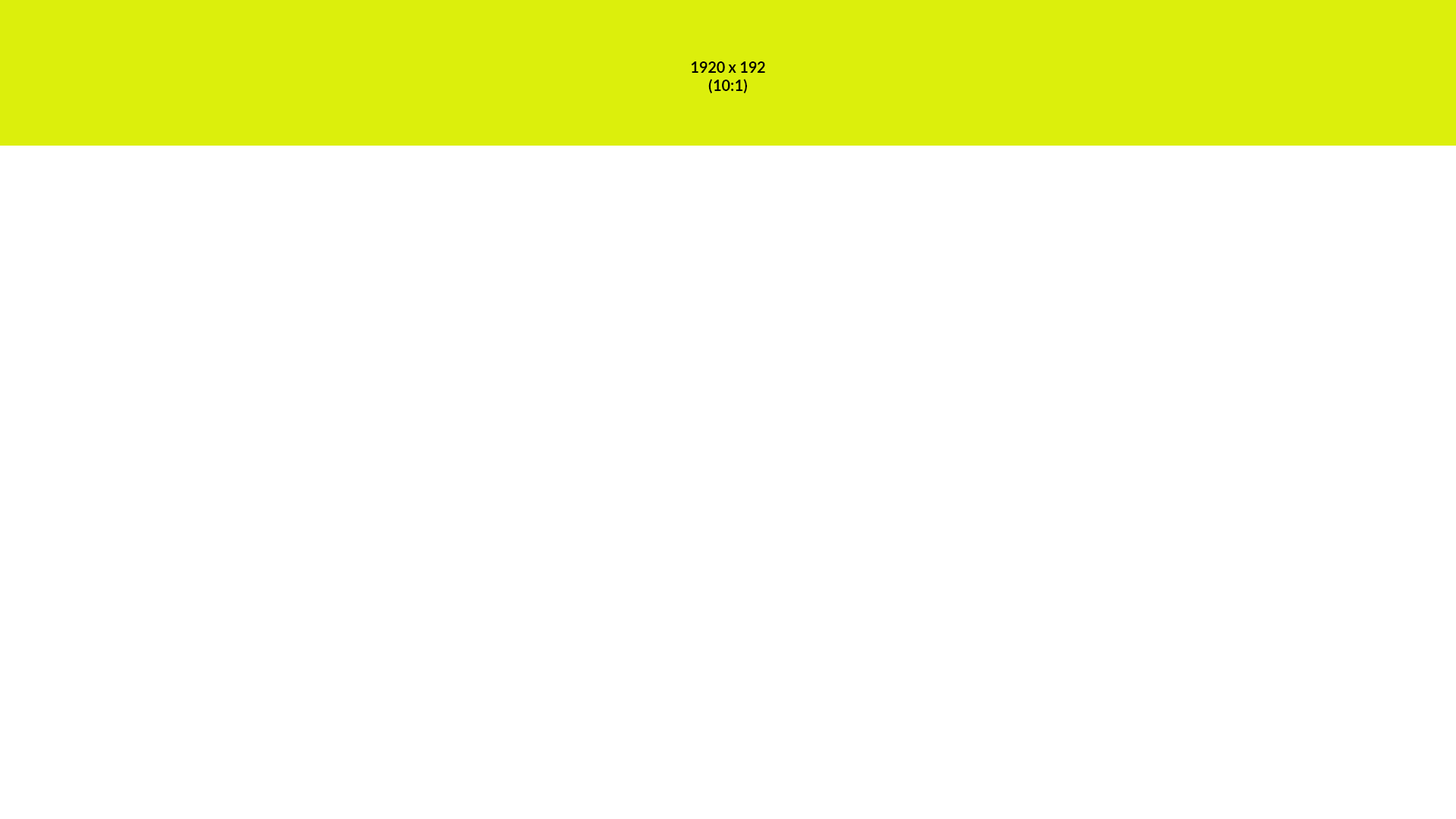
<style>
.page{position:relative;width:1456px;height:819px;background:#ffffff}
.page>*{position:absolute;margin:0}
.t1{font:15.2px "Lato-Bold";color:#000000}
</style>
<div class="page">
<p class="t1" style="left:691px;top:61px;width:74px;height:33px;text-align:center">1920 x 192<br>(10:1)</p>
</div>
